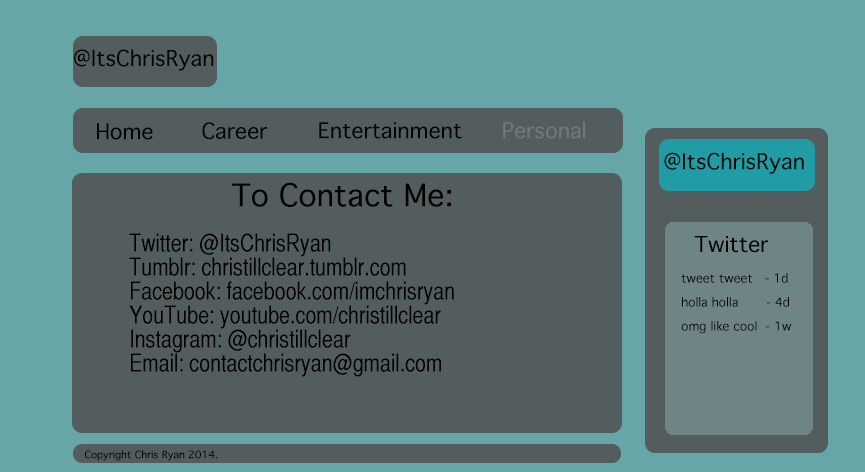
<style>
.page{position:relative;width:865px;height:472px;background:#535d5d}
.page>*{position:absolute;margin:0}
.t1{font:21px "Thonburi";color:#030303}
.t2{font:21px "Thonburi";color:#707a7b}
.t3{font:21px "Thonburi";color:#090909}
.t4{font:30px "Thonburi";color:#000000}
.t5{font:24px/24px "HelveticaCYPlain";color:#000000}
.t6{font:21px "Thonburi";color:#000000}
.t7{font:12px/24px "Thonburi";color:#000000}
.t8{font:10px "Thonburi";color:#000000}
</style>
<div class="page">
<p class="t1" style="left:74px;top:49px;width:140px;height:22px">@ItsChrisRyan</p>
<p class="t1" style="left:97px;top:123px;width:56px;height:17px">Home</p>
<p class="t1" style="left:202px;top:122px;width:65px;height:18px">Career</p>
<p class="t1" style="left:319px;top:122px;width:143px;height:17px">Entertainment</p>
<p class="t2" style="left:503px;top:121px;width:82px;height:18px">Personal</p>
<p class="t3" style="left:664px;top:152px;width:140px;height:22px">@ItsChrisRyan</p>
<p class="t4" style="left:232px;top:182px;width:219px;height:25px">To Contact Me:</p>
<p class="t5" style="left:129px;top:233px;width:325px;height:144px">Twitter: @ItsChrisRyan<br>Tumblr: christillclear.tumblr.com<br>Facebook: facebook.com/imchrisryan<br>YouTube: youtube.com/christillclear<br>Instagram: @christillclear<br>Email: contactchrisryan@gmail.com</p>
<p class="t6" style="left:694px;top:236px;width:74px;height:17px">Twitter</p>
<p class="t7" style="left:681px;top:273px;width:111px;height:61px">tweet tweet   - 1d<br>holla holla       - 4d<br>omg like cool  - 1w</p>
<p class="t8" style="left:85px;top:450px;width:132px;height:11px">Copyright Chris Ryan 2014.</p>
</div>
